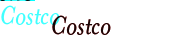
<style>
.page{position:relative;width:179px;height:35px;background:#ffffff}
.page>*{position:absolute;margin:0}
.t1{font:30px "MrsEavesItalic";color:#40ffff}
</style>
<div class="page">
<p class="t1" style="left:1px;top:5px;width:59px;height:20px">Costco</p>
</div>
